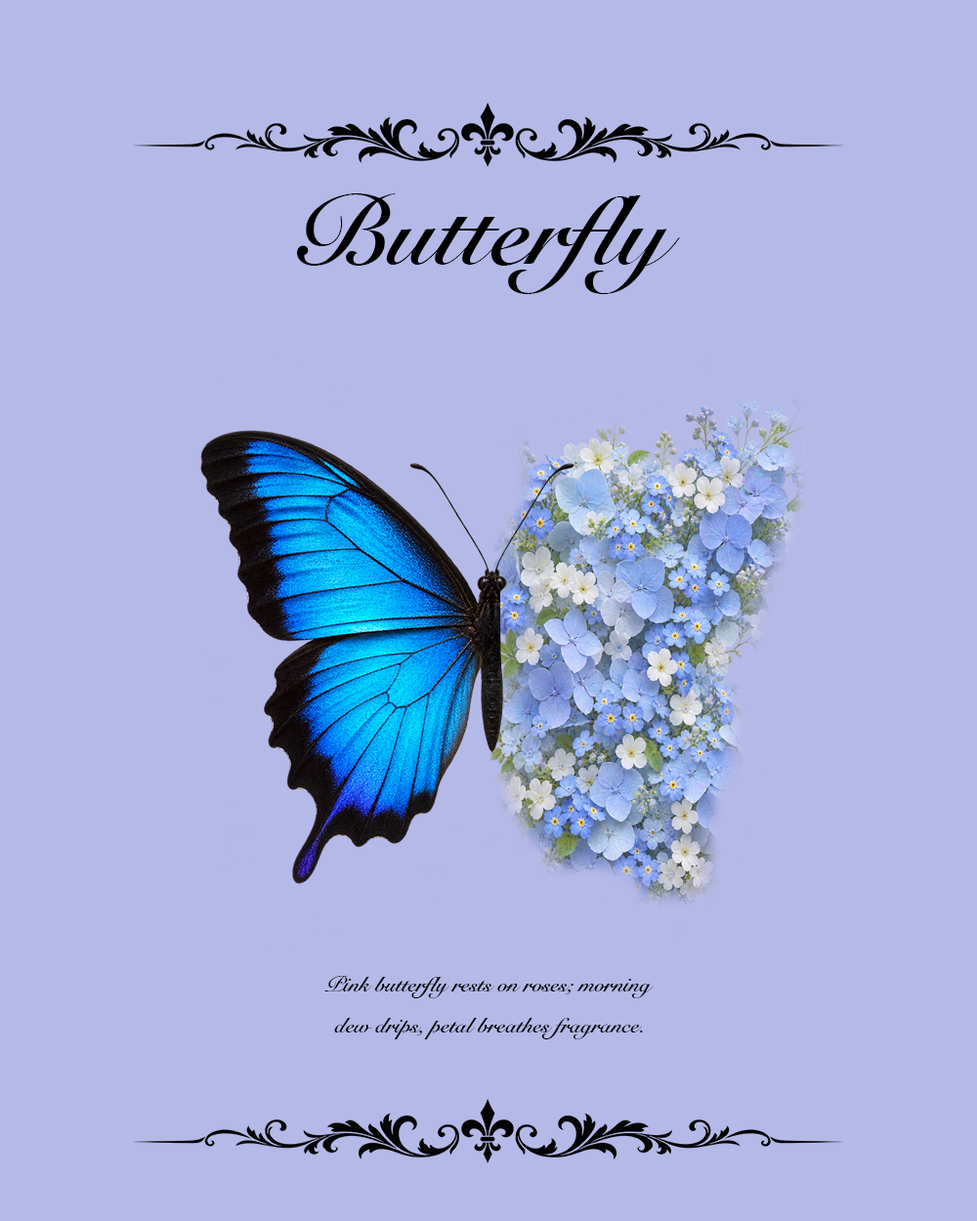
<style>
.page{position:relative;width:977px;height:1221px;background:#b5b9e7}
.page>*{position:absolute;margin:0}
.t1{font:97.7px "SnellRoundhand-Bold";color:#000000}
.t2{font:21.5px "SnellRoundhand-Bold";color:#000000}
</style>
<div class="page">
<p class="t1" style="left:297px;top:193px;width:383px;height:101px">Butterfly</p>
<p class="t2" style="left:324px;top:976px;width:329px;height:22px">Pink butterfly rests on roses; morning</p>
<p class="t2" style="left:334px;top:1018px;width:309px;height:21px">dew drips, petal breathes fragrance.</p>
</div>
